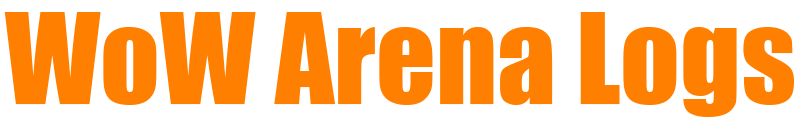
<style>
.page{position:relative;width:800px;height:128px;background:#ffffff}
.page>*{position:absolute;margin:0}
.t1{font:116.7px "Impact";color:#ff8000}
</style>
<div class="page">
<p class="t1" style="left:4px;top:12px;width:790px;height:105px">WoW Arena Logs</p>
</div>
